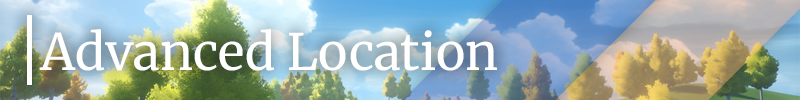
<style>
.page{position:relative;width:800px;height:100px}
.page>*{position:absolute;margin:0}
.t1{font:50px "Merriweather-Regular";color:#ffffff}
</style>
<div class="page">
<p class="t1" style="left:39px;top:29px;width:458px;height:42px">Advanced Location</p>
</div>
